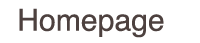
<style>
.page{position:relative;width:200px;height:43px;background:#ffffff}
.page>*{position:absolute;margin:0}
.t1{font:30.1px "Helvetica";color:#4d413f}
</style>
<div class="page">
<p class="t1" style="left:19px;top:8px;width:145px;height:30px">Homepage</p>
</div>
